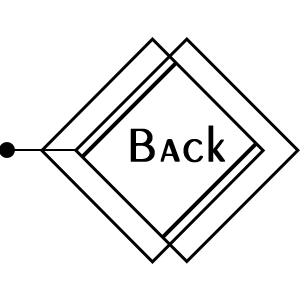
<style>
.page{position:relative;width:300px;height:300px;background:#ffffff}
.page>*{position:absolute;margin:0}
.t1{font:49.6px "Peignot";color:#000000;font-weight:bold}
</style>
<div class="page">
<p class="t1" style="left:130px;top:125px;width:95px;height:38px">Back</p>
</div>
